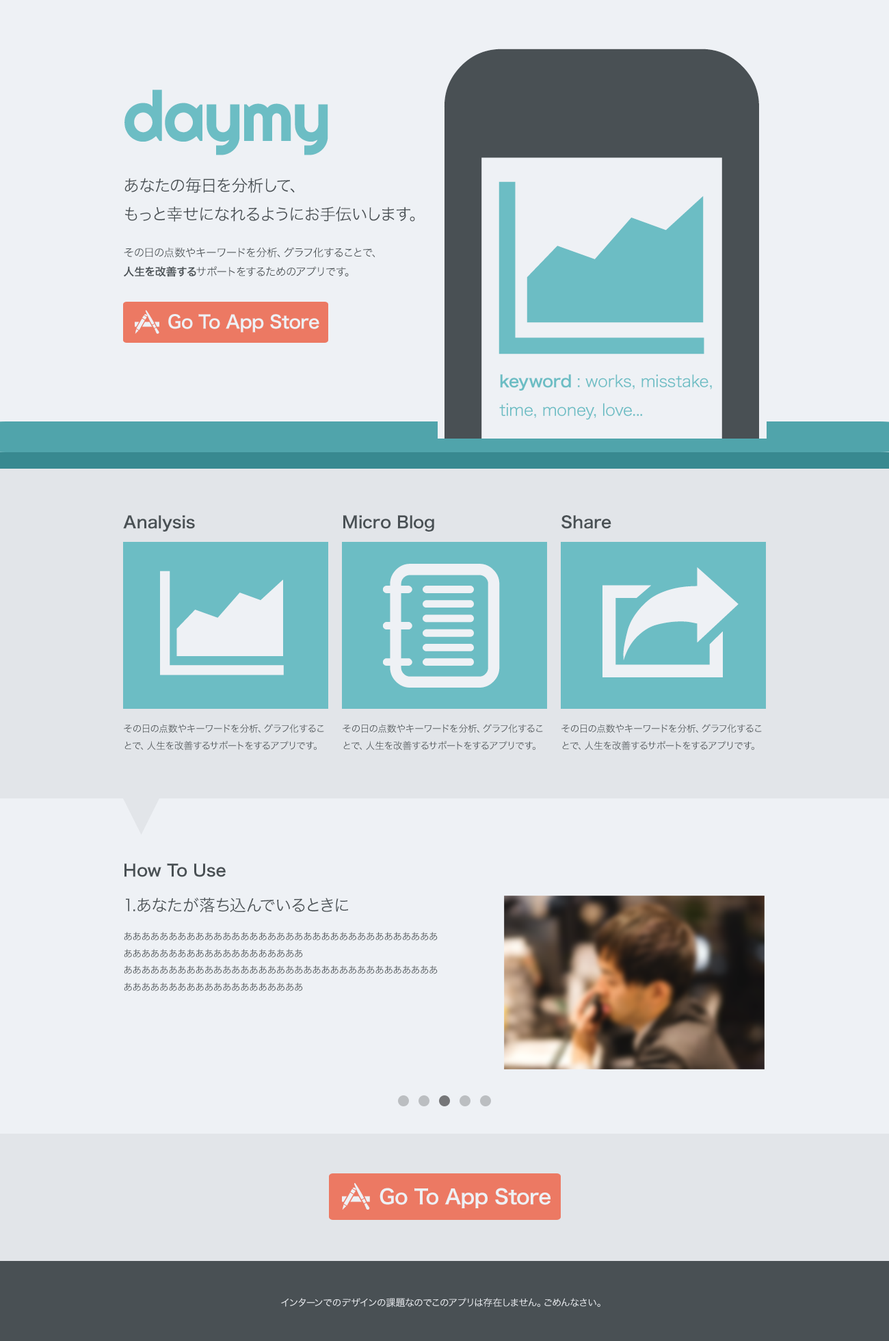
<style>
.page{position:relative;width:889px;height:1341px;background:#eef1f5}
.page>*{position:absolute;margin:0}
.t1{font:771.7px "LigatureSymbols";letter-spacing:-0.02em}
.t2{font:69.8px "Righteous-Regular";letter-spacing:-0.02em;color:#6cbdc4}
.t3{font:16.4px "HiraKakuPro-W3";color:#495054}
.t4{font:292.2px "LigatureSymbols";letter-spacing:-0.02em;color:#6cbdc4}
.t5{font:10.9px "HiraKakuPro-W3";color:#495054}
.t6{font:10.9px "HiraKakuPro-W6";color:#495054}
.t7{font:32.8px "LigatureSymbols";letter-spacing:-0.02em;color:#eef1f5}
.t8{font:17.8px "HiraKakuPro-W6";letter-spacing:-0.02em;color:#eef1f5}
.t9{font:16.4px "HiraKakuPro-W3";letter-spacing:-0.02em;color:#6cbdc4}
.t10{font:16.4px "HiraKakuPro-W6";letter-spacing:-0.02em;color:#6cbdc4}
.t11{font:16.4px "HiraKakuPro-W6";color:#495054}
.t12{font:176.4px "LigatureSymbols";color:#eef1f5}
.t13{font:9.6px "HiraKakuPro-W3";color:#495054}
.t14{font:37.2px "LigatureSymbols";letter-spacing:-0.02em;color:#eef1f5}
.t15{font:20.1px "HiraKakuPro-W6";letter-spacing:-0.02em;color:#eef1f5}
.t16{font:9.6px "HiraKakuPro-W3";color:#eef1f5}
</style>
<div class="page">
<p class="t1" style="left:444px;top:49px;width:315px;height:579px">iphone</p>
<p class="t2" style="left:125px;top:90px;width:203px;height:65px">daymy</p>
<p class="t3" style="left:125px;top:177px;width:290px;height:45px">あなたの毎日を分析して、<br>もっと幸せになれるようにお手伝いします。</p>
<p class="t4" style="left:499px;top:181px;width:206px;height:173px">graph</p>
<p class="t5" style="left:123px;top:247px;width:253px;height:30px">その日の点数やキーワードを分析、グラフ化することで、<br><span class="t6">人生を改善する</span>サポートをするためのアプリです。</p>
<p class="t7" style="left:135px;top:310px;width:24px;height:24px">app</p>
<p class="t8" style="left:168px;top:314px;width:151px;height:18px">Go To App Store</p>
<p class="t9" style="left:499px;top:374px;width:213px;height:46px"><span class="t10">keyword</span> : works, misstake, <br>time, money, love...</p>
<p class="t11" style="left:123px;top:515px;width:72px;height:17px">Analysis</p>
<p class="t11" style="left:343px;top:515px;width:91px;height:17px">Micro Blog</p>
<p class="t11" style="left:562px;top:515px;width:50px;height:14px">Share</p>
<p class="t12" style="left:383px;top:564px;width:117px;height:124px">memo</p>
<p class="t12" style="left:603px;top:567px;width:136px;height:110px">share</p>
<p class="t12" style="left:160px;top:571px;width:124px;height:104px">graph</p>
<p class="t13" style="left:124px;top:724px;width:200px;height:26px">その日の点数やキーワードを分析、グラフ化するこ<br>とで、人生を改善するサポートをするアプリです。</p>
<p class="t13" style="left:343px;top:724px;width:200px;height:26px">その日の点数やキーワードを分析、グラフ化するこ<br>とで、人生を改善するサポートをするアプリです。</p>
<p class="t13" style="left:562px;top:724px;width:200px;height:26px">その日の点数やキーワードを分析、グラフ化するこ<br>とで、人生を改善するサポートをするアプリです。</p>
<p class="t11" style="left:124px;top:863px;width:102px;height:14px">How To Use</p>
<p class="t3" style="left:125px;top:898px;width:223px;height:15px">1.あなたが落ち込んでいるときに</p>
<p class="t13" style="left:124px;top:932px;width:314px;height:59px">あああああああああああああああああああああああああああああああああああああああああああああああああああああああ<br>あああああああああああああああああああああああああああああああああああああああああああああああああああああああ</p>
<p class="t14" style="left:342px;top:1183px;width:28px;height:26px">app</p>
<p class="t15" style="left:380px;top:1188px;width:171px;height:20px">Go To App Store</p>
<p class="t16" style="left:281px;top:1298px;width:320px;height:9px">インターンでのデザインの課題なのでこのアプリは存在しません。ごめんなさい。</p>
</div>
